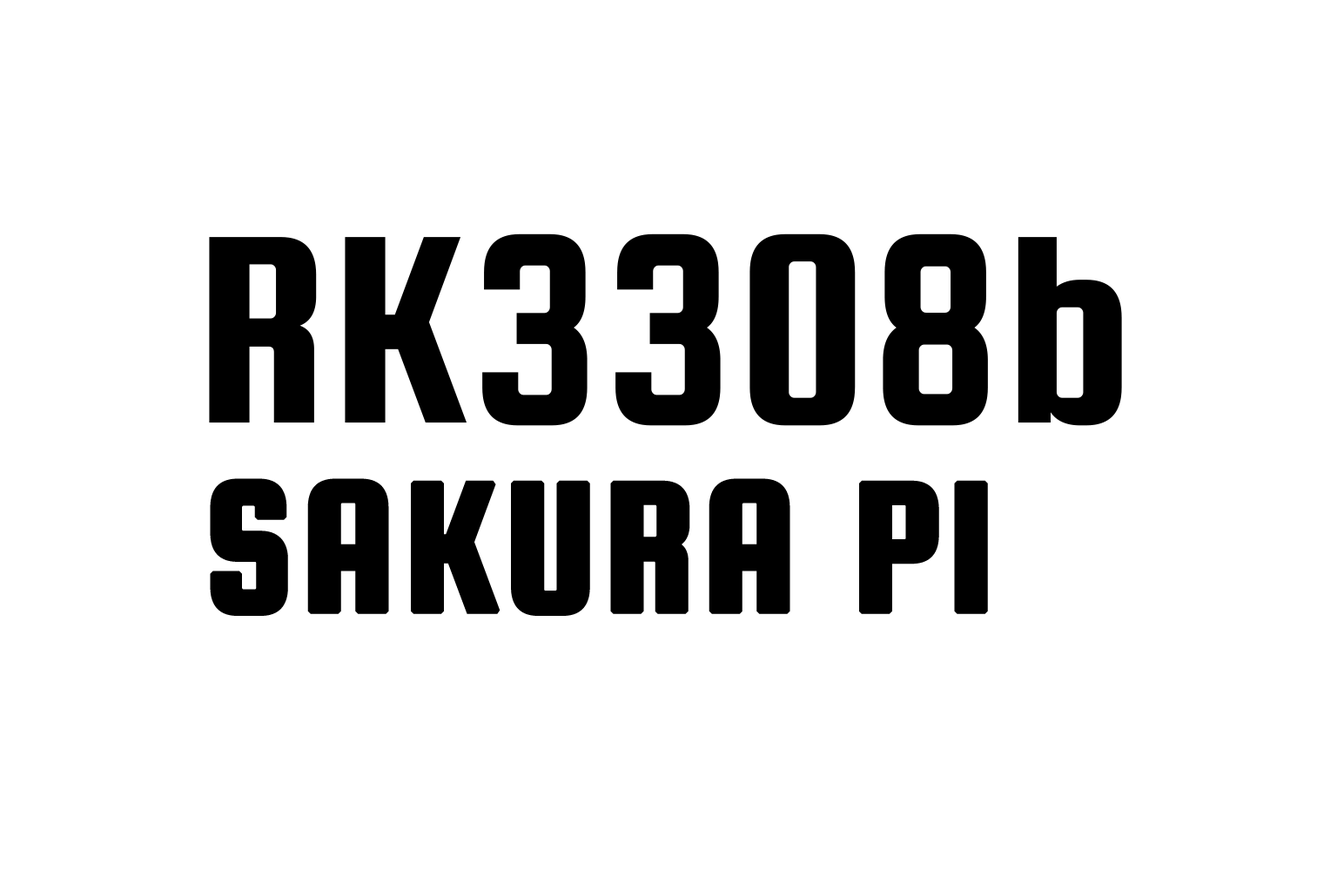
<style>
.page{position:relative;width:1337px;height:892px;background:#ffffff}
.page>*{position:absolute;margin:0}
.t1{font:286.8px "SquadaOne-Regular";letter-spacing:0.01em;color:#000000}
.t2{font:197.3px "SquadaOne-Regular";letter-spacing:0.01em;color:#000000;font-weight:bold}
</style>
<div class="page">
<p class="t1" style="left:209px;top:233px;width:913px;height:193px">RK3308b</p>
<p class="t2" style="left:210px;top:478px;width:778px;height:138px">SAKURA PI</p>
</div>
